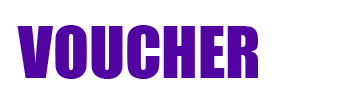
<style>
.page{position:relative;width:350px;height:100px;background:#ffffff}
.page>*{position:absolute;margin:0}
.t1{font:65.9px "Impact";color:#5104a2}
</style>
<div class="page">
<p class="t1" style="left:17px;top:25px;width:241px;height:54px">VOUCHER</p>
</div>
